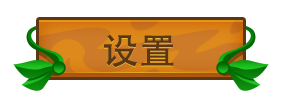
<style>
.page{position:relative;width:287px;height:103px;background:#ffffff}
.page>*{position:absolute;margin:0}
.t1{font:36px "AdobeHeitiStd-Regular";letter-spacing:0.025em;color:#5b3716}
</style>
<div class="page">
<p class="t1" style="left:104px;top:34px;width:70px;height:34px">设置</p>
</div>
